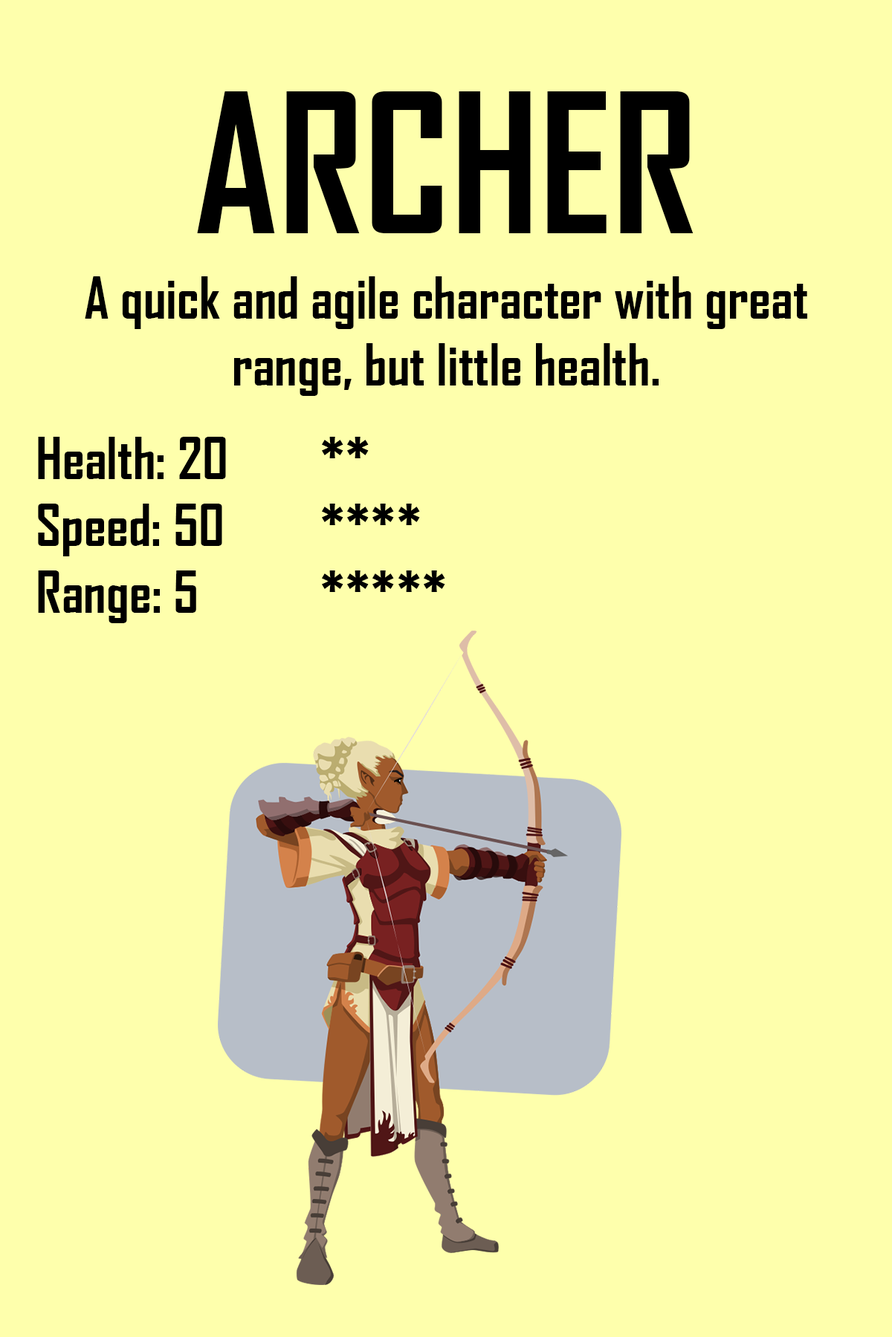
<style>
.page{position:relative;width:892px;height:1337px;background:#feffac}
.page>*{position:absolute;margin:0}
.t1{font:185.8px "AgencyFB-Bold";color:#000000}
.t2{font:55.7px "AgencyFB-Bold";color:#000000}
</style>
<div class="page">
<p class="t1" style="left:197px;top:91px;width:496px;height:142px">ARCHER</p>
<p class="t2" style="left:85px;top:276px;width:722px;height:120px;text-align:center">A quick and agile character with great range, but little health.</p>
<p class="t2" style="left:38px;top:437px;width:188px;height:186px">Health: 20<br>Speed: 50<br>Range: 5</p>
<p class="t2" style="left:322px;top:437px;width:123px;height:155px">**<br>****<br>*****</p>
</div>
